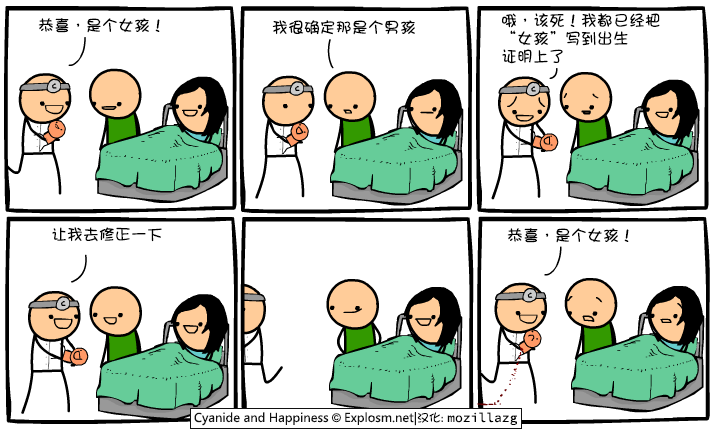
<style>
.page{position:relative;width:720px;height:430px;background:#ffffff}
.page>*{position:absolute;margin:0}
.t1{font:16px/18px "DFGirl";color:#000000}
.t2{font:16px "DFGirl";color:#000000}
</style>
<div class="page">
<p class="t1" style="left:502px;top:13px;width:158px;height:51px">哦，该死！我都已经把<br>“女孩”写到出生<br>证明上了</p>
<p class="t2" style="left:38px;top:18px;width:122px;height:15px">恭喜，是个女孩！</p>
<p class="t2" style="left:272px;top:20px;width:143px;height:15px">我很确定那是个男孩</p>
<p class="t2" style="left:52px;top:227px;width:110px;height:15px">让我去修正一下</p>
<p class="t2" style="left:507px;top:228px;width:122px;height:15px">恭喜，是个女孩！</p>
</div>
